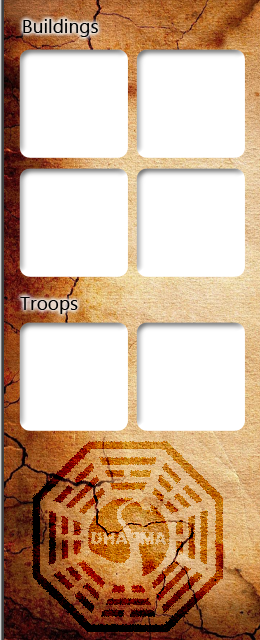
<style>
.page{position:relative;width:260px;height:640px;background:#ffffff}
.page>*{position:absolute;margin:0}
.t1{font:19px "Gadugi";color:#000000}
</style>
<div class="page">
<p class="t1" style="left:23px;top:19px;width:75px;height:18px">Buildings</p>
<p class="t1" style="left:20px;top:297px;width:58px;height:17px">Troops</p>
</div>
